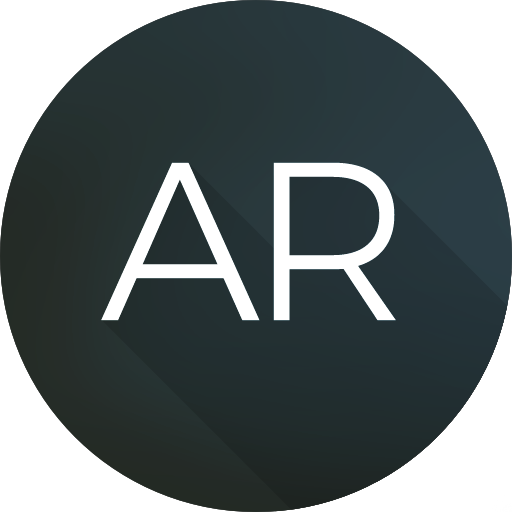
<style>
.page{position:relative;width:512px;height:512px;background:#ffffff}
.page>*{position:absolute;margin:0}
.t1{font:225px "Montserrat-Light";letter-spacing:-0.05em;color:#ffffff}
</style>
<div class="page">
<p class="t1" style="left:101px;top:162px;width:295px;height:159px">AR</p>
</div>
